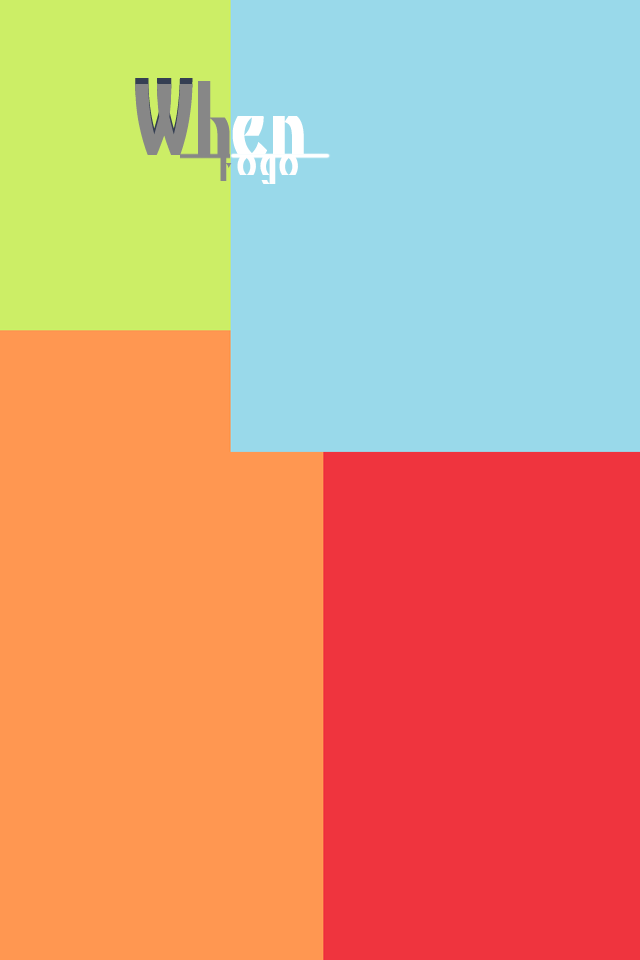
<style>
.page{position:relative;width:640px;height:960px;background:#ff9751}
.page>*{position:absolute;margin:0}
.t1{font:100.7px "KinoMT";letter-spacing:0.005em;color:#878787}
.t2{font:100.7px "KinoMT";letter-spacing:0.005em;color:#878787;scale:1.03 1}
.t3{font:100.7px "KinoMT";letter-spacing:0.005em;color:#ffffff}
.t4{font:48px "KinoMT";letter-spacing:0.005em;color:#878787;scale:1.03 1}
.t5{font:48px "KinoMT";letter-spacing:0.005em;color:#fffefe;scale:1.03 1}
</style>
<div class="page">
<p class="t1" style="left:135px;top:78px;width:58px;height:71px">W</p>
<p class="t1" style="left:135px;top:84px;width:58px;height:71px">W</p>
<p class="t2" style="left:198px;top:81px;width:32px;height:74px">h</p>
<p class="t3" style="left:232px;top:116px;width:72px;height:38px">en</p>
<p class="t4" style="left:220px;top:157px;width:12px;height:24px">t</p>
<p class="t5" style="left:237px;top:157px;width:19px;height:18px">o</p>
<p class="t5" style="left:260px;top:157px;width:38px;height:27px">go</p>
</div>
